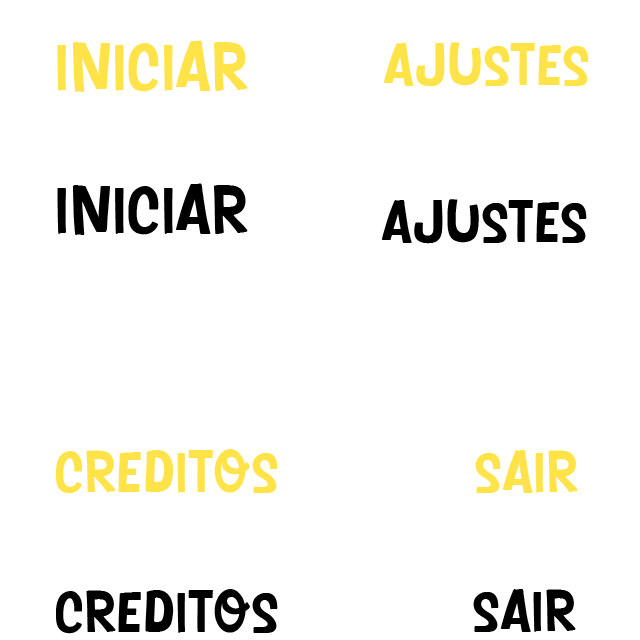
<style>
.page{position:relative;width:640px;height:640px;background:#ffffff}
.page>*{position:absolute;margin:0}
.t1{font:66.7px "Duck-Come";color:#ffe349}
.t2{font:58.3px "Duck-Come";color:#ffe349}
.t3{font:66.7px "Duck-Come";color:#000000}
.t4{font:58.3px "Duck-Come";color:#000000}
</style>
<div class="page">
<p class="t1" style="left:57px;top:40px;width:191px;height:52px">Iniciar</p>
<p class="t2" style="left:383px;top:42px;width:206px;height:45px">ajustes</p>
<p class="t3" style="left:57px;top:183px;width:191px;height:52px">Iniciar</p>
<p class="t4" style="left:381px;top:199px;width:206px;height:45px">ajustes</p>
<p class="t2" style="left:56px;top:449px;width:222px;height:45px">creditos</p>
<p class="t2" style="left:475px;top:450px;width:103px;height:43px">sair</p>
<p class="t4" style="left:56px;top:589px;width:222px;height:45px">creditos</p>
<p class="t4" style="left:473px;top:589px;width:103px;height:43px">sair</p>
</div>
